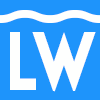
<style>
.page{position:relative;width:100px;height:100px;background:#1e94fb}
.page>*{position:absolute;margin:0}
.t1{font:80.9px "Lovelo-Black";letter-spacing:-0.1em;color:#fefffe;scale:0.87 1}
</style>
<div class="page">
<p class="t1" style="left:10px;top:32px;width:86px;height:60px">lw</p>
</div>
